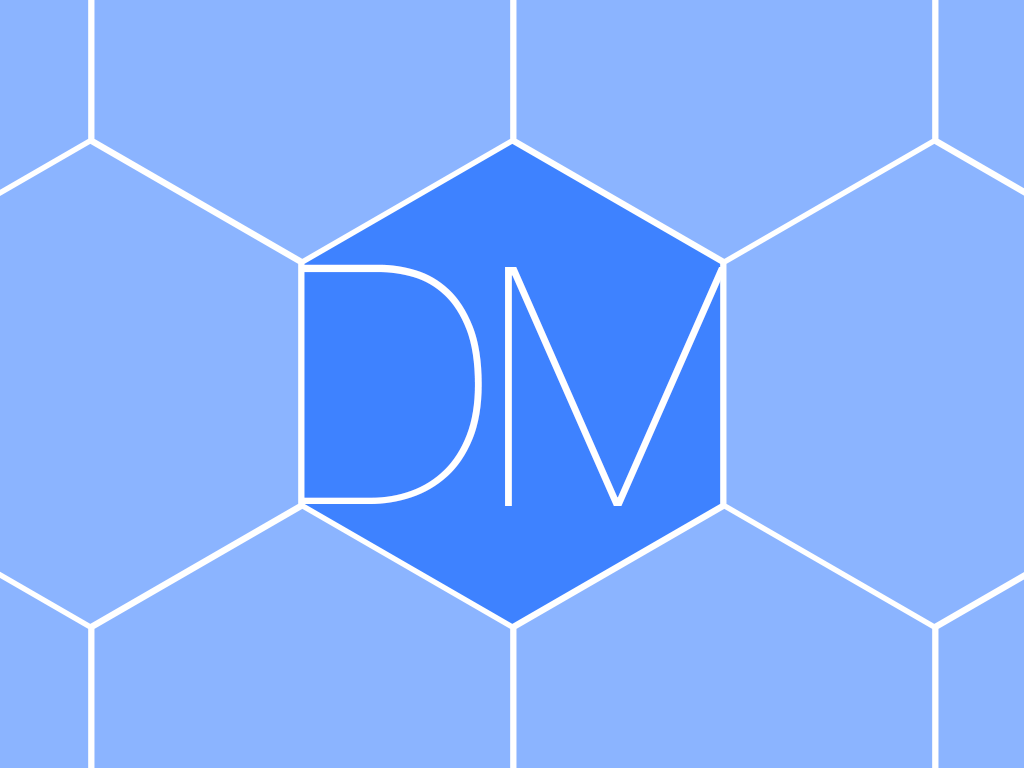
<style>
.page{position:relative;width:1024px;height:768px;background:#8bb4ff}
.page>*{position:absolute;margin:0}
.t1{font:335px "HelveticaNeue-UltraLight";color:#ffffff}
</style>
<div class="page">
<p class="t1" style="left:296px;top:264px;width:186px;height:240px">D</p>
<p class="t1" style="left:505px;top:267px;width:226px;height:239px">M</p>
</div>
